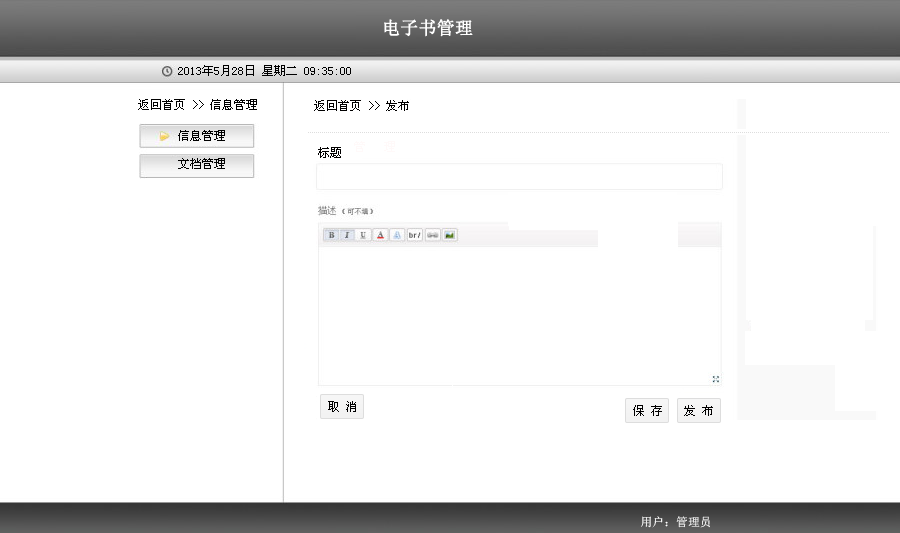
<style>
.page{position:relative;width:900px;height:533px;background:#ffffff}
.page>*{position:absolute;margin:0}
.t1{font:17.8px "SimSun";color:#ffffff;font-weight:bold}
.t2{font:11.9px "SimSun";color:#000000}
.t3{font:12px "SimSun";color:#010000}
.t4{font:11.9px "SimSun";color:#fff9f9}
.t5{font:11.9px "SimSun";color:#ffffff}
</style>
<div class="page">
<p class="t1" style="left:384px;top:19px;width:89px;height:18px">电子书管理</p>
<p class="t2" style="left:178px;top:65px;width:173px;height:11px">2013年5月28日 星期二 09:35:00</p>
<p class="t2" style="left:138px;top:99px;width:119px;height:11px">返回首页 &gt;&gt; 信息管理</p>
<p class="t3" style="left:314px;top:100px;width:95px;height:11px">返回首页 &gt;&gt; 发布</p>
<p class="t2" style="left:178px;top:130px;width:47px;height:11px">信息管理</p>
<p class="t3" style="left:318px;top:147px;width:23px;height:11px">标题</p>
<p class="t4" style="left:354px;top:141px;width:41px;height:11px">管   理</p>
<p class="t2" style="left:178px;top:158px;width:47px;height:11px">文档管理</p>
<p class="t3" style="left:328px;top:401px;width:28px;height:11px">取 消</p>
<p class="t3" style="left:633px;top:405px;width:29px;height:11px">保 存</p>
<p class="t3" style="left:684px;top:405px;width:29px;height:11px">发 布</p>
<p class="t5" style="left:641px;top:516px;width:69px;height:12px">用户：管理员</p>
</div>
